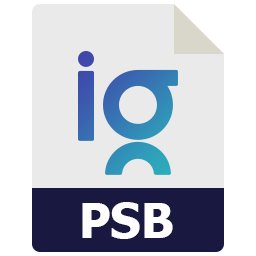
<style>
.page{position:relative;width:256px;height:256px;background:#eaeaea}
.page>*{position:absolute;margin:0}
.t1{font:48px "Tahoma-Bold";color:#ffffff}
</style>
<div class="page">
<p class="t1" style="left:82px;top:202px;width:91px;height:37px">PSB</p>
</div>
